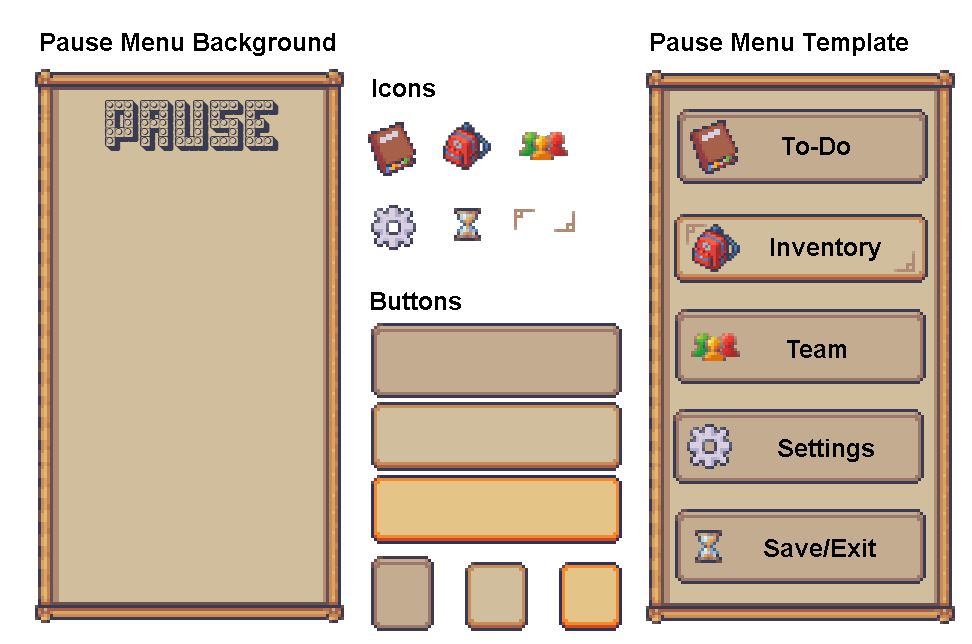
<style>
.page{position:relative;width:972px;height:644px;background:#ffffff}
.page>*{position:absolute;margin:0}
.t1{font:25px "Arial-BoldMT";color:#000000}
.t2{font:66.7px "Toys-Regular";color:#3a3a50}
</style>
<div class="page">
<p class="t1" style="left:41px;top:33px;width:294px;height:23px">Pause Menu Background</p>
<p class="t1" style="left:651px;top:33px;width:257px;height:23px">Pause Menu Template</p>
<p class="t1" style="left:373px;top:79px;width:62px;height:18px">Icons</p>
<p class="t2" style="left:104px;top:100px;width:175px;height:51px">PAUSE</p>
<p class="t1" style="left:782px;top:137px;width:68px;height:18px">To-Do</p>
<p class="t1" style="left:771px;top:238px;width:110px;height:23px">Inventory</p>
<p class="t1" style="left:371px;top:292px;width:90px;height:18px">Buttons</p>
<p class="t1" style="left:787px;top:340px;width:59px;height:18px">Team</p>
<p class="t1" style="left:778px;top:439px;width:96px;height:23px">Settings</p>
<p class="t1" style="left:764px;top:539px;width:112px;height:18px">Save/Exit</p>
</div>
